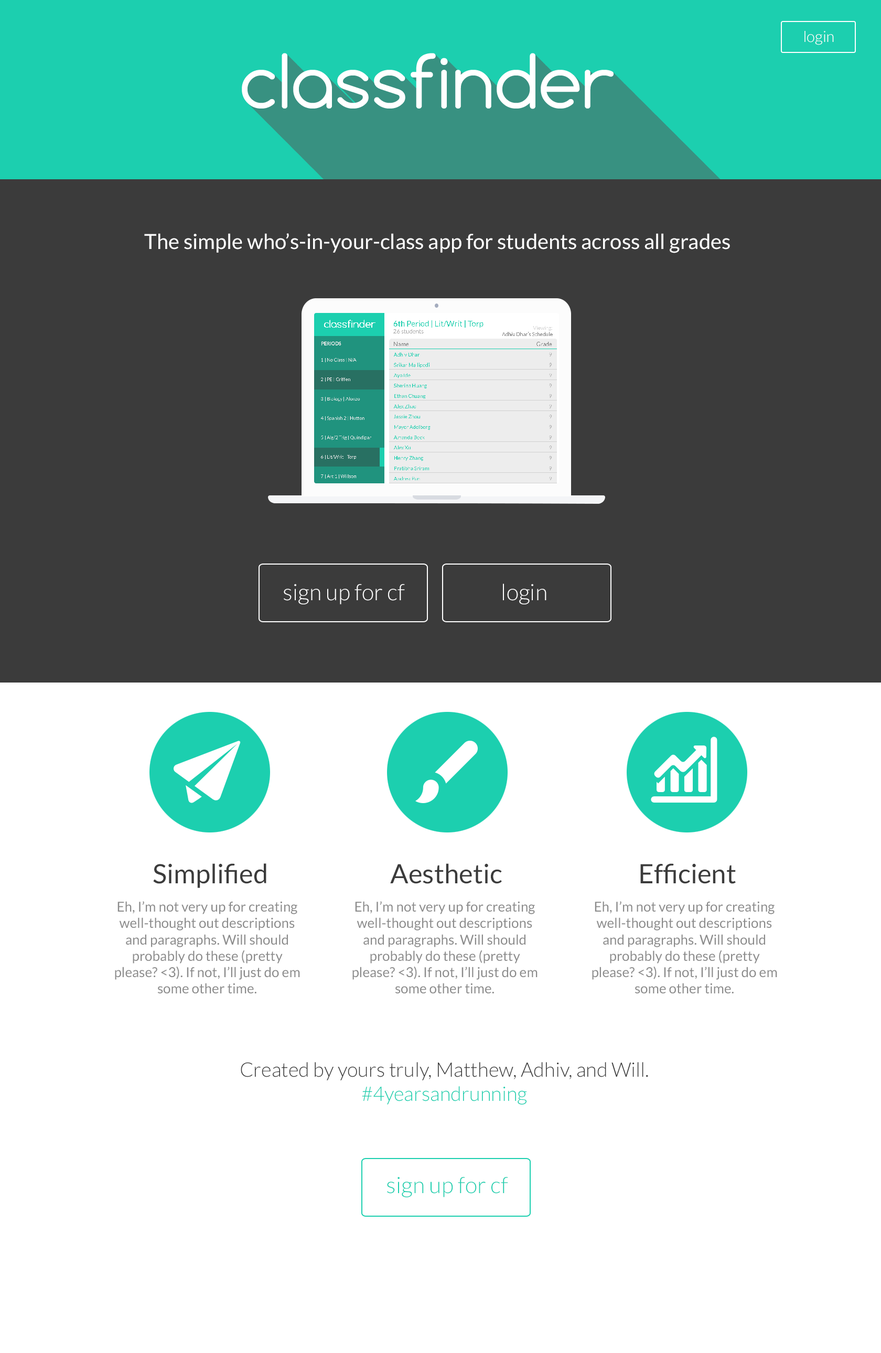
<style>
.page{position:relative;width:881px;height:1353px;background:#ffffff}
.page>*{position:absolute;margin:0}
.t1{font:15.2px "Lato-Light";color:#ffffff}
.t2{font:21px "Lato-Regular";color:#ffffff}
.t3{font:22.5px "Lato-Light";color:#ffffff}
.t4{font:26.7px "Lato-Regular";color:#3b3b3b}
.t5{font:13.6px "Lato-Regular";color:#8b8b8b}
.t6{font:19.9px "Lato-Light";color:#3b3b3b}
.t7{font:19.9px "Lato-Light";color:#1ccfaf}
.t8{font:22.5px "Lato-Light";color:#1ccfaf}
</style>
<div class="page">
<p class="t1" style="left:804px;top:31px;width:30px;height:14px">login</p>
<p class="t2" style="left:144px;top:233px;width:586px;height:20px">The simple who’s-in-your-class app for students across all grades</p>
<p class="t3" style="left:284px;top:584px;width:121px;height:21px">sign up for cf</p>
<p class="t3" style="left:503px;top:584px;width:43px;height:21px">login</p>
<p class="t4" style="left:153px;top:864px;width:113px;height:24px">Simplified</p>
<p class="t4" style="left:390px;top:864px;width:112px;height:20px">Aesthetic</p>
<p class="t4" style="left:640px;top:864px;width:96px;height:20px">Efficient</p>
<p class="t5" style="left:115px;top:901px;width:185px;height:93px;text-align:center">Eh, I’m not very up for creating well-thought out descriptions and paragraphs. Will should probably do these (pretty please? &lt;3). If not, I’ll just do em some other time.</p>
<p class="t5" style="left:352px;top:901px;width:186px;height:93px;text-align:center">Eh, I’m not very up for creating well-thought out descriptions and paragraphs. Will should probably do these (pretty please? &lt;3). If not, I’ll just do em some other time.</p>
<p class="t5" style="left:592px;top:901px;width:185px;height:93px;text-align:center">Eh, I’m not very up for creating well-thought out descriptions and paragraphs. Will should probably do these (pretty please? &lt;3). If not, I’ll just do em some other time.</p>
<p class="t6" style="left:241px;top:1062px;width:407px;height:43px;text-align:center">Created by yours truly, Matthew, Adhiv, and Will.<br><span class="t7">#4yearsandrunning</span></p>
<p class="t8" style="left:387px;top:1177px;width:121px;height:21px">sign up for cf</p>
</div>
